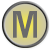
<style>
.page{position:relative;width:50px;height:50px;background:#ffffff}
.page>*{position:absolute;margin:0}
.t1{font:30px "TVpl";letter-spacing:0.05em;color:#6a6a6a}
</style>
<div class="page">
<p class="t1" style="left:13px;top:11px;width:24px;height:27px">M</p>
</div>
